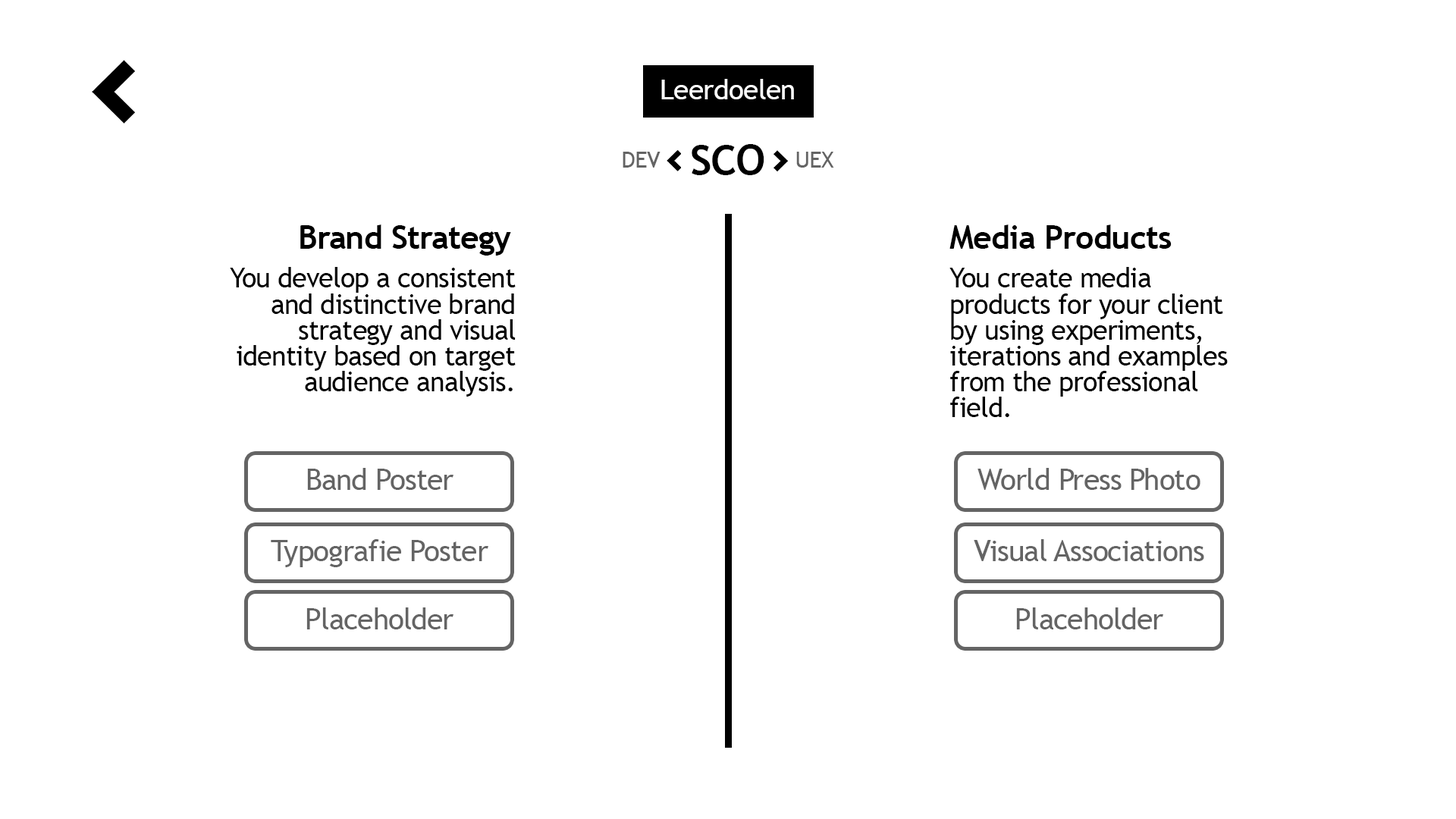
<style>
.page{position:relative;width:1456px;height:819px;background:#ffffff}
.page>*{position:absolute;margin:0}
.t1{font:28.1px "TrebuchetMS";letter-spacing:-0.02em;color:#ffffff}
.t2{font:42.2px "TrebuchetMS-Bold";letter-spacing:-0.02em;color:#000000}
.t3{font:22.7px "TrebuchetMS";letter-spacing:-0.02em;color:#646464}
.t4{font:32.4px "TrebuchetMS-Bold";letter-spacing:-0.02em;color:#000000}
.t5{font:27px/25.9px "TrebuchetMS";letter-spacing:-0.02em;color:#000000}
.t6{font:29.2px "TrebuchetMS";letter-spacing:-0.02em;color:#646464}
</style>
<div class="page">
<p class="t1" style="left:661px;top:79px;width:133px;height:20px">Leerdoelen</p>
<p class="t2" style="left:692px;top:144px;width:72px;height:31px">SCO</p>
<p class="t3" style="left:623px;top:152px;width:37px;height:16px">DEV</p>
<p class="t3" style="left:796px;top:152px;width:38px;height:16px">UEX</p>
<p class="t4" style="left:300px;top:224px;width:211px;height:32px">Brand Strategy</p>
<p class="t4" style="left:949px;top:224px;width:223px;height:25px">Media Products</p>
<p class="t5" style="left:230px;top:267px;width:286px;height:130px;text-align:right">You develop a consistent and distinctive brand strategy and visual identity based on target audience analysis.</p>
<p class="t5" style="left:949px;top:267px;width:279px;height:150px">You create media products for your client by using experiments, iterations and examples from the professional field.</p>
<p class="t6" style="left:307px;top:468px;width:146px;height:22px">Band Poster</p>
<p class="t6" style="left:977px;top:468px;width:223px;height:22px">World Press Photo</p>
<p class="t6" style="left:271px;top:539px;width:217px;height:28px">Typografie Poster</p>
<p class="t6" style="left:974px;top:539px;width:230px;height:22px">Visual Associations</p>
<p class="t6" style="left:306px;top:607px;width:147px;height:22px">Placeholder</p>
<p class="t6" style="left:1016px;top:607px;width:147px;height:22px">Placeholder</p>
</div>
